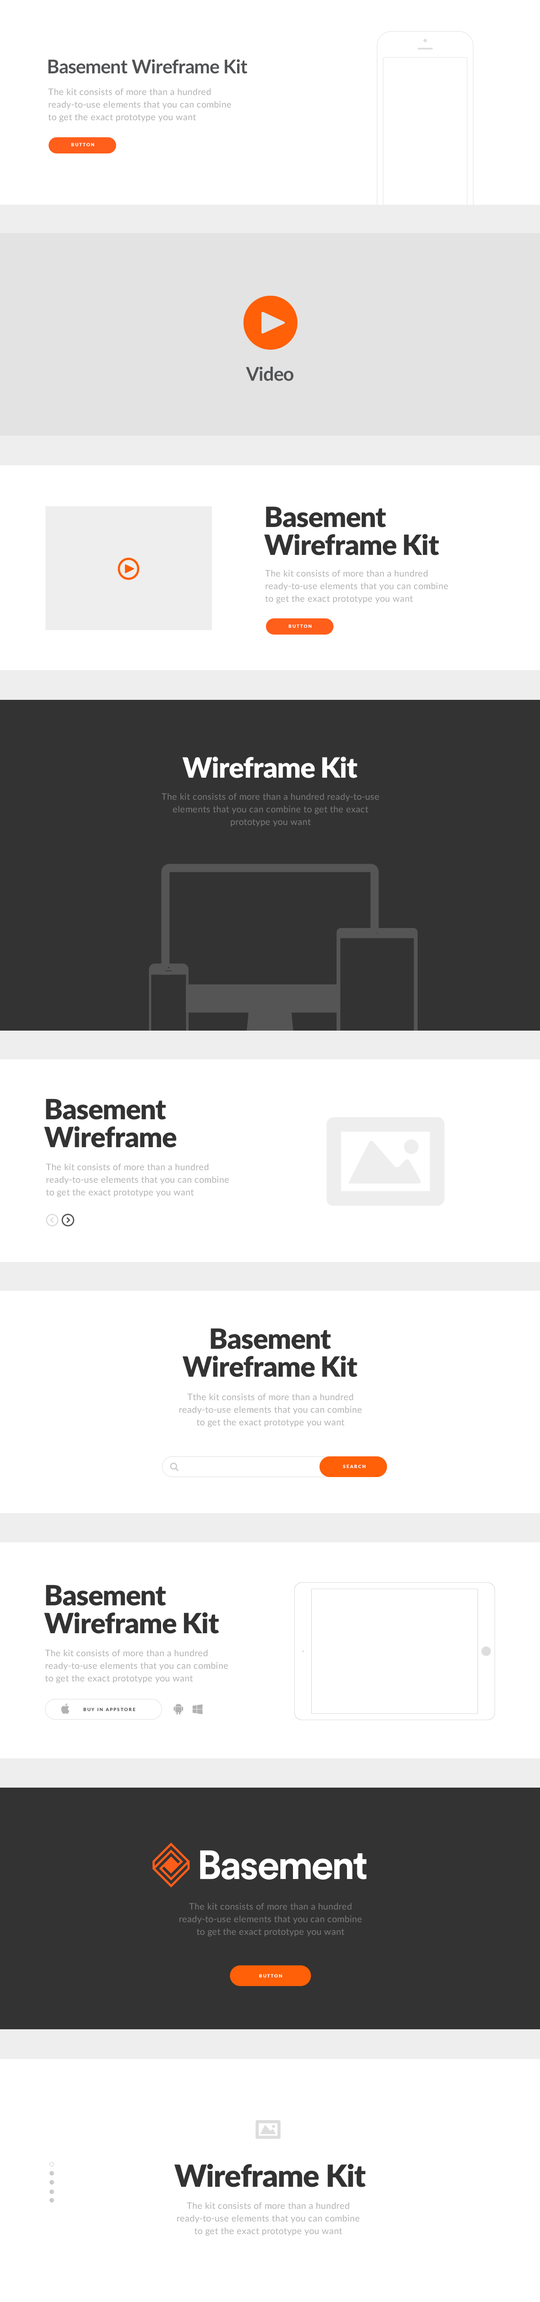
<style>
.page{position:relative;width:540px;height:2302px;background:#ffffff}
.page>*{position:absolute;margin:0}
.t1{font:18.9px "Lato-Bold";letter-spacing:-0.02em;color:#515254}
.t2{font:9px/12.6px "Lato-Regular";letter-spacing:0.02em;color:#b2b2b2}
.t3{font:4.5px "Lato-Black";letter-spacing:0.2em;color:#ffffff}
.t4{font:27.9px/27.9px "Lato-Black";letter-spacing:-0.02em;color:#333333}
.t5{font:27.9px "Lato-Black";letter-spacing:-0.02em;color:#ffffff}
.t6{font:9px/12.6px "Lato-Regular";letter-spacing:0.02em;color:#777777}
.t7{font:4.5px "Lato-Black";letter-spacing:0.2em;color:#fefefe}
.t8{font:4.5px "Lato-Black";letter-spacing:0.2em;color:#515356}
.t9{font:30.6px "Lato-Black";letter-spacing:-0.02em;color:#333333}
</style>
<div class="page">
<p class="t1" style="left:48px;top:59px;width:200px;height:15px">Basement Wireframe Kit</p>
<p class="t2" style="left:48px;top:88px;width:183px;height:34px">The kit consists of more than a hundred ready-to-use elements that you can combine to get the exact prototype you want</p>
<p class="t3" style="left:71px;top:143px;width:23px;height:3px">BUTTON</p>
<p class="t1" style="left:246px;top:366px;width:47px;height:15px">Video</p>
<p class="t4" style="left:264px;top:506px;width:175px;height:49px">Basement Wireframe Kit</p>
<p class="t2" style="left:265px;top:570px;width:183px;height:33px">The kit consists of more than a hundred ready-to-use elements that you can combine to get the exact prototype you want</p>
<p class="t3" style="left:288px;top:624px;width:23px;height:4px">BUTTON</p>
<p class="t5" style="left:182px;top:756px;width:176px;height:22px">Wireframe Kit</p>
<p class="t6" style="left:162px;top:793px;width:217px;height:34px;text-align:center">The kit consists of more than a hundred ready-to-use elements that you can combine to get the exact prototype you want</p>
<p class="t4" style="left:44px;top:1098px;width:132px;height:50px">Basement<br>Wireframe</p>
<p class="t2" style="left:46px;top:1163px;width:183px;height:34px">The kit consists of more than a hundred ready-to-use elements that you can combine to get the exact prototype you want</p>
<p class="t4" style="left:182px;top:1328px;width:176px;height:49px;text-align:center">Basement Wireframe Kit</p>
<p class="t2" style="left:179px;top:1393px;width:183px;height:34px;text-align:center">Tthe kit consists of more than a hundred ready-to-use elements that you can combine to get the exact prototype you want</p>
<p class="t7" style="left:343px;top:1464px;width:22px;height:4px">SEARCH</p>
<p class="t4" style="left:44px;top:1584px;width:175px;height:50px">Basement Wireframe Kit</p>
<p class="t2" style="left:45px;top:1649px;width:183px;height:34px">The kit consists of more than a hundred ready-to-use elements that you can combine to get the exact prototype you want</p>
<p class="t8" style="left:83px;top:1707px;width:52px;height:4px">BUY IN APPSTORE</p>
<p class="t6" style="left:179px;top:1903px;width:183px;height:33px;text-align:center">The kit consists of more than a hundred ready-to-use elements that you can combine to get the exact prototype you want</p>
<p class="t7" style="left:259px;top:1974px;width:23px;height:3px">BUTTON</p>
<p class="t9" style="left:174px;top:2164px;width:192px;height:23px">Wireframe Kit</p>
<p class="t2" style="left:177px;top:2202px;width:183px;height:34px;text-align:center">The kit consists of more than a hundred ready-to-use elements that you can combine to get the exact prototype you want</p>
</div>
